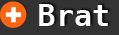
<style>
.page{position:relative;width:119px;height:35px;background:#333333}
.page>*{position:absolute;margin:0}
.t1{font:30px "Menlo-Bold";color:#ffffff}
</style>
<div class="page">
<p class="t1" style="left:39px;top:4px;width:69px;height:22px">Brat</p>
</div>
